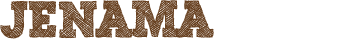
<style>
.page{position:relative;width:340px;height:39px;background:#ffffff}
.page>*{position:absolute;margin:0}
.t1{font:50px "ScribbleBoxDEMO";color:#684121}
</style>
<div class="page">
<p class="t1" style="left:0px;top:0px;width:214px;height:39px">Jenama</p>
</div>
